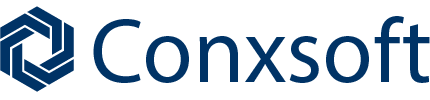
<style>
.page{position:relative;width:430px;height:100px;background:#ffffff}
.page>*{position:absolute;margin:0}
.t1{font:92px "MyriadPro-Regular";color:#003366}
</style>
<div class="page">
<p class="t1" style="left:93px;top:16px;width:337px;height:67px">Conxsoft</p>
</div>
